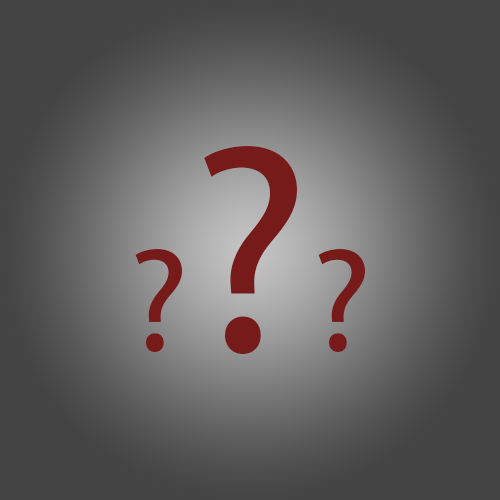
<style>
.page{position:relative;width:500px;height:500px;background:#444444}
.page>*{position:absolute;margin:0}
.t1{font:150px "MyriadPro-Regular";color:#771a1a}
.t2{font:300px "MyriadPro-Regular";color:#771a1a}
</style>
<div class="page">
<p class="t1" style="left:135px;top:146px;width:230px;height:208px">?<span class="t2">?</span>?</p>
</div>
